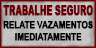
<style>
.page{position:relative;width:96px;height:48px}
.page>*{position:absolute;margin:0}
.t1{font:13.4px "Arial-Black";letter-spacing:-0.04em;color:#6a0003;text-transform:uppercase;font-weight:bold;scale:0.59 1}
.t2{font:9.2px/12px "Arial-BoldMT";letter-spacing:-0.02em;color:#000000;text-transform:uppercase;font-weight:bold;scale:0.83 1}
</style>
<div class="page">
<p class="t1" style="left:3px;top:5px;width:90px;height:11px">TRAbaLHE SEGURO</p>
<p class="t2" style="left:3px;top:21px;width:90px;height:20px;text-align:center">RELATE VAZAMENTOS<br>IMEDIATAMENTE</p>
</div>
